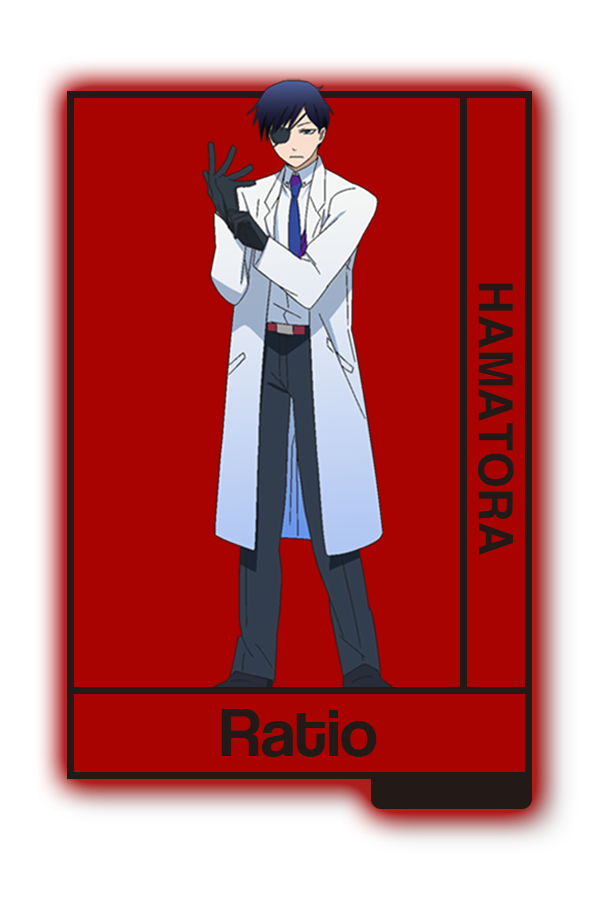
<style>
.page{position:relative;width:600px;height:900px;background:#a80301}
.page>*{position:absolute;margin:0}
.t1{font:47.4px "Helvetica-Bold";color:#231917}
.t2{font:70.1px "CoolveticaRg-Regular";color:#231917}
</style>
<div class="page">
<p class="t1" style="left:478px;top:283px;width:36px;height:272px;rotate:90deg">HAMATORA</p>
<p class="t2" style="left:221px;top:709px;width:156px;height:48px">Ratio</p>
</div>
